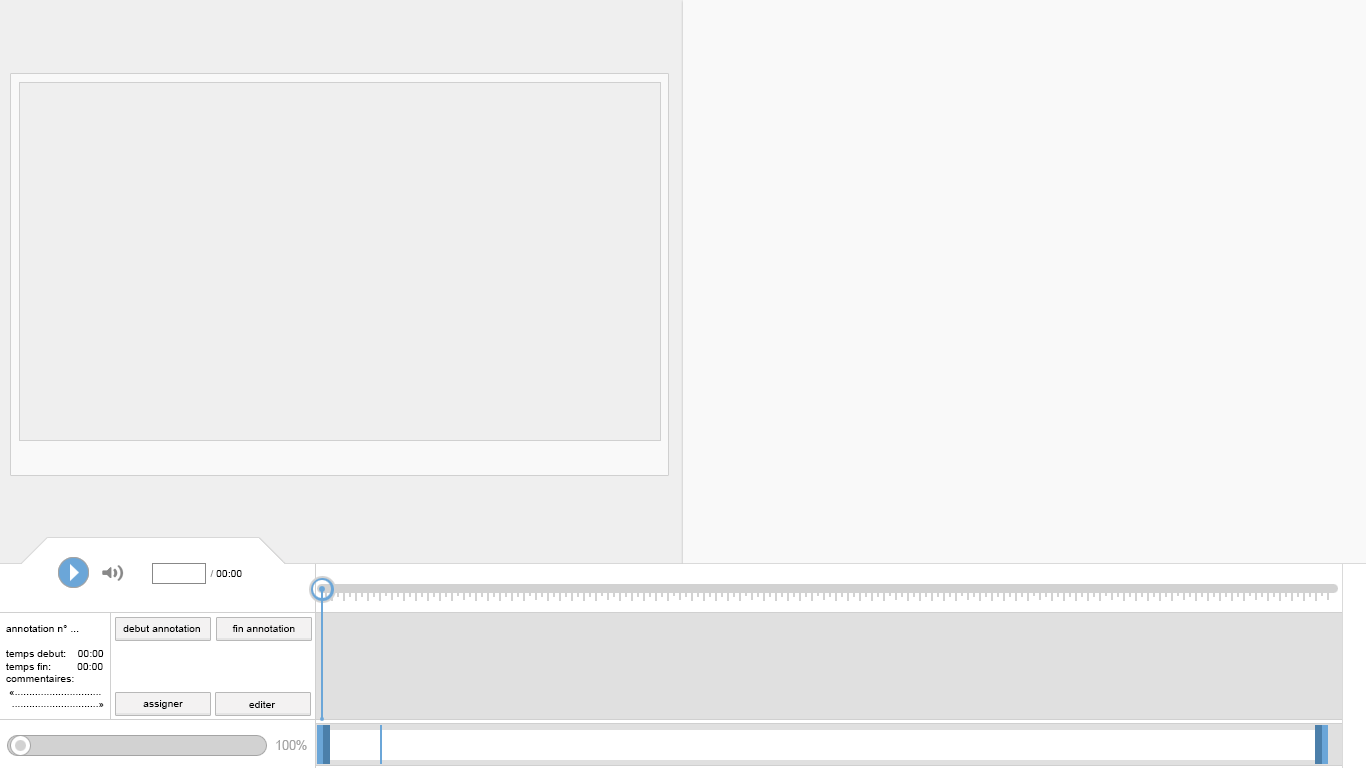
<style>
.page{position:relative;width:1366px;height:768px;background:#f9f9f9}
.page>*{position:absolute;margin:0}
.t1{font:10.4px "ArialMT";color:#000000}
.t2{font:10.4px "ArialMT";color:#888888}
.t3{font:12.5px "ArialMT";color:#a4a4a4}
</style>
<div class="page">
<p class="t1" style="left:210px;top:570px;width:32px;height:7px"><span class="t2"> / </span>00:00</p>
<p class="t1" style="left:6px;top:625px;width:98px;height:82px">annotation n° ...<br><br>temps debut:    00:00<br>temps fin:         00:00<br>commentaires:<br> «..............................<br>  ..............................»</p>
<p class="t3" style="left:276px;top:740px;width:31px;height:10px">100%</p>
</div>
